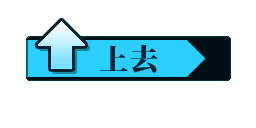
<style>
.page{position:relative;width:256px;height:128px;background:#ffffff}
.page>*{position:absolute;margin:0}
.t1{font:29.3px "SourceHanSerifCN-Heavy";letter-spacing:0.045em;color:#002334}
</style>
<div class="page">
<p class="t1" style="left:99px;top:44px;width:59px;height:29px">上去</p>
</div>
